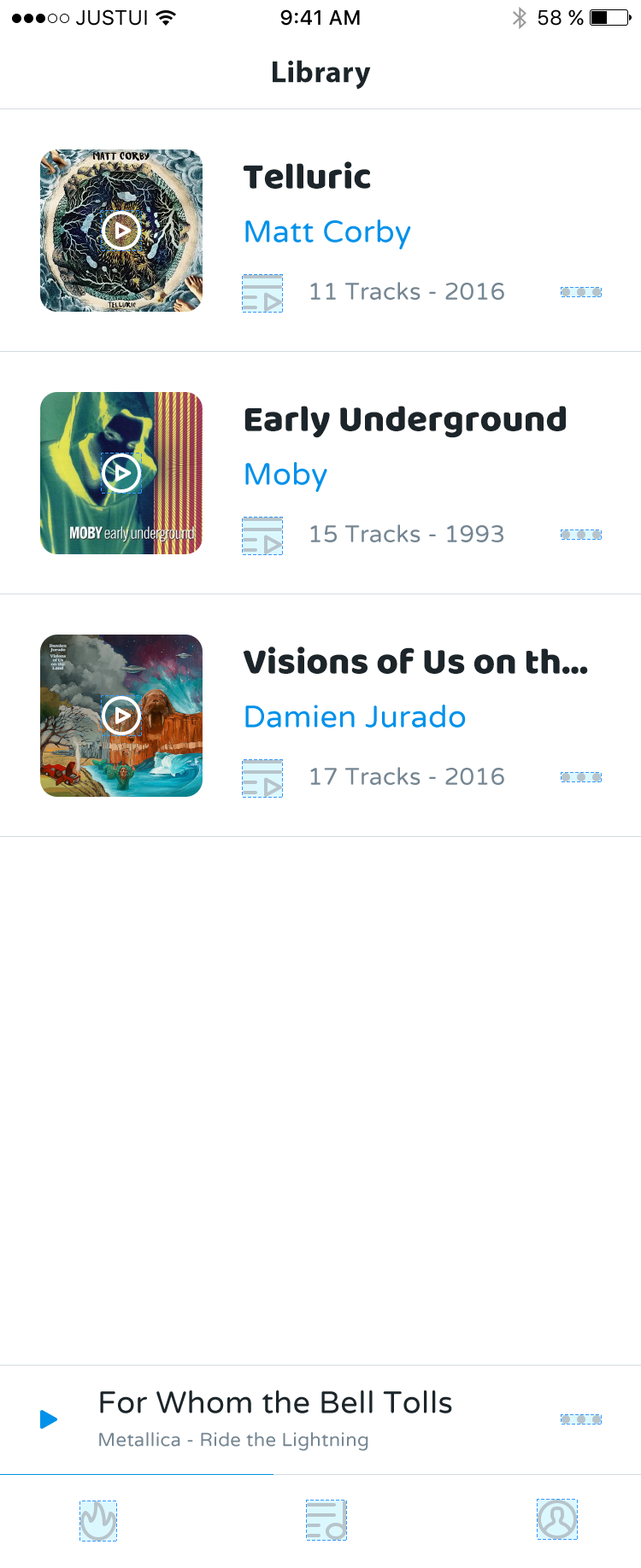
<style>
.page{position:relative;width:641px;height:1568px;background:#ffffff}
.page>*{position:absolute;margin:0}
.t1{font:20.5px "SFUIText-Regular";color:#000000}
.t2{font:20.5px "SFUIText-Medium";color:#000000}
.t3{font:30.7px "MyriadHebrew-Bold";letter-spacing:0.008em;color:#1c252a}
.t4{font:37.6px "BalooBhai-Regular";color:#1c252a}
.t5{font:30.7px "VarelaRound-Regular";letter-spacing:0.008em;color:#0091ea}
.t6{font:23.9px "VarelaRound-Regular";letter-spacing:0.012em;color:#758692}
.t7{font:30.7px "VarelaRound-Regular";letter-spacing:0.008em;color:#1c252a}
.t8{font:18.8px "VarelaRound-Regular";letter-spacing:0.012em;color:#758692}
</style>
<div class="page">
<p class="t1" style="left:76px;top:9px;width:71px;height:17px">JUSTUI</p>
<p class="t2" style="left:280px;top:9px;width:80px;height:17px">9:41 AM</p>
<p class="t1" style="left:537px;top:9px;width:46px;height:17px">58 %</p>
<p class="t3" style="left:272px;top:60px;width:99px;height:30px">Library</p>
<p class="t4" style="left:243px;top:161px;width:128px;height:28px">Telluric</p>
<p class="t5" style="left:245px;top:219px;width:166px;height:30px">Matt Corby</p>
<p class="t6" style="left:310px;top:282px;width:194px;height:18px">11 Tracks - 2016</p>
<p class="t4" style="left:244px;top:406px;width:321px;height:32px">Early Underground</p>
<p class="t5" style="left:245px;top:462px;width:82px;height:30px">Moby</p>
<p class="t6" style="left:310px;top:524px;width:193px;height:18px">15 Tracks - 1993</p>
<p class="t4" style="left:243px;top:647px;width:345px;height:27px">Visions of Us on th…</p>
<p class="t5" style="left:245px;top:705px;width:220px;height:23px">Damien Jurado</p>
<p class="t6" style="left:310px;top:767px;width:194px;height:18px">17 Tracks - 2016</p>
<p class="t7" style="left:100px;top:1390px;width:352px;height:23px">For Whom the Bell Tolls</p>
<p class="t8" style="left:99px;top:1432px;width:269px;height:19px">Metallica - Ride the Lightning</p>
</div>
